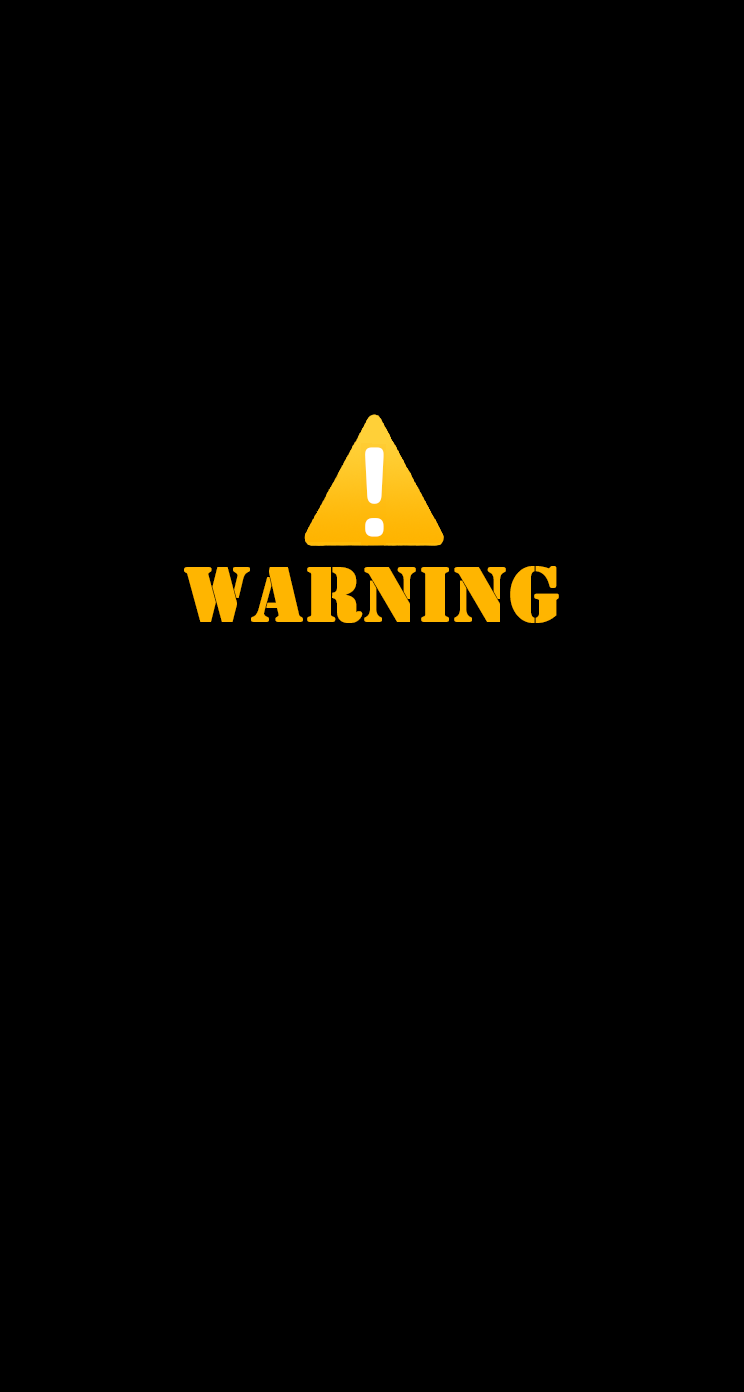
<style>
.page{position:relative;width:744px;height:1392px;background:#000000}
.page>*{position:absolute;margin:0}
.t1{font:72px "StencilStd";color:#ffb500;text-transform:uppercase;font-weight:bold}
</style>
<div class="page">
<p class="t1" style="left:184px;top:566px;width:375px;height:57px">Warning</p>
</div>
